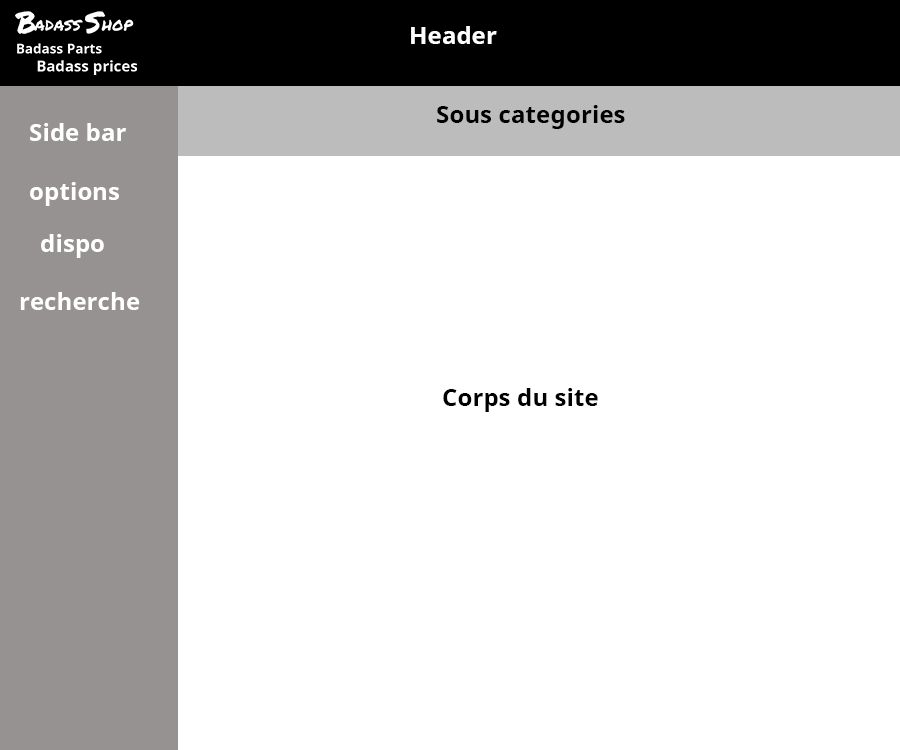
<style>
.page{position:relative;width:900px;height:750px;background:#ffffff}
.page>*{position:absolute;margin:0}
.t1{font:24px "NotoSans-Bold";letter-spacing:0.005em;color:#ffffff}
.t2{font:24px "NotoSans-Bold";letter-spacing:0.005em;color:#000000}
</style>
<div class="page">
<p class="t1" style="left:411px;top:26px;width:86px;height:18px">Header</p>
<p class="t2" style="left:437px;top:105px;width:188px;height:24px">Sous categories</p>
<p class="t1" style="left:30px;top:123px;width:96px;height:18px">Side bar</p>
<p class="t1" style="left:30px;top:182px;width:89px;height:24px">options</p>
<p class="t1" style="left:41px;top:234px;width:63px;height:24px">dispo</p>
<p class="t2" style="left:443px;top:388px;width:155px;height:24px">Corps du site</p>
</div>
